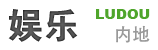
<style>
.page{position:relative;width:158px;height:50px;background:#ffffff}
.page>*{position:absolute;margin:0}
.t1{font:36px "Jdahei";color:#5e5e5e}
.t2{font:14px "Arial-Black";color:#4fa52b}
.t3{font:18px "AdobeHeitiStd-Regular";color:#999999}
</style>
<div class="page">
<p class="t1" style="left:8px;top:9px;width:70px;height:33px">娱乐</p>
<p class="t2" style="left:96px;top:9px;width:54px;height:10px">LUDOU</p>
<p class="t3" style="left:116px;top:25px;width:34px;height:18px">内地</p>
</div>
